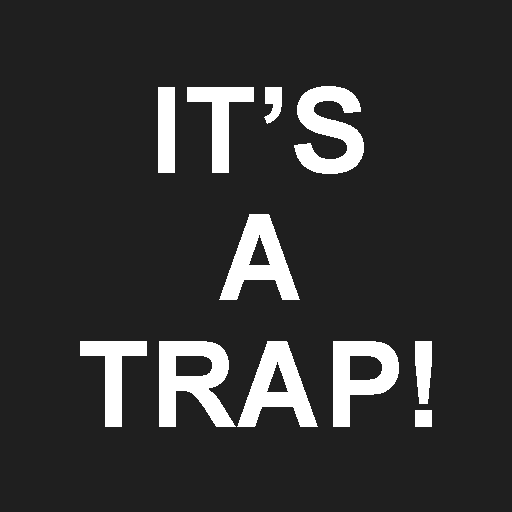
<style>
.page{position:relative;width:512px;height:512px;background:#1f1f1f}
.page>*{position:absolute;margin:0}
.t1{font:120px/127px "Arial-BoldMT";color:#ffffff;text-transform:uppercase}
</style>
<div class="page">
<p class="t1" style="left:80px;top:86px;width:352px;height:341px;text-align:center">It’s<br>A<br>Trap!</p>
</div>
